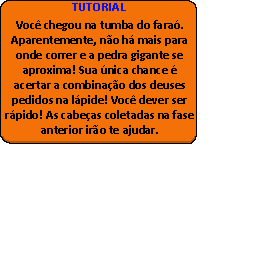
<style>
.page{position:relative;width:256px;height:256px;background:#ffffff}
.page>*{position:absolute;margin:0}
.t1{font:12.5px "Calibri-Bold";color:#000000}
</style>
<div class="page">
<p class="t1" style="left:5px;top:20px;width:189px;height:116px;text-align:center">Você chegou na tumba do faraó. Aparentemente, não há mais para onde correr e a pedra gigante se aproxima! Sua única chance é acertar a combinação dos deuses pedidos na lápide! Você dever ser rápido! As cabeças coletadas na fase anterior irão te ajudar.</p>
</div>
